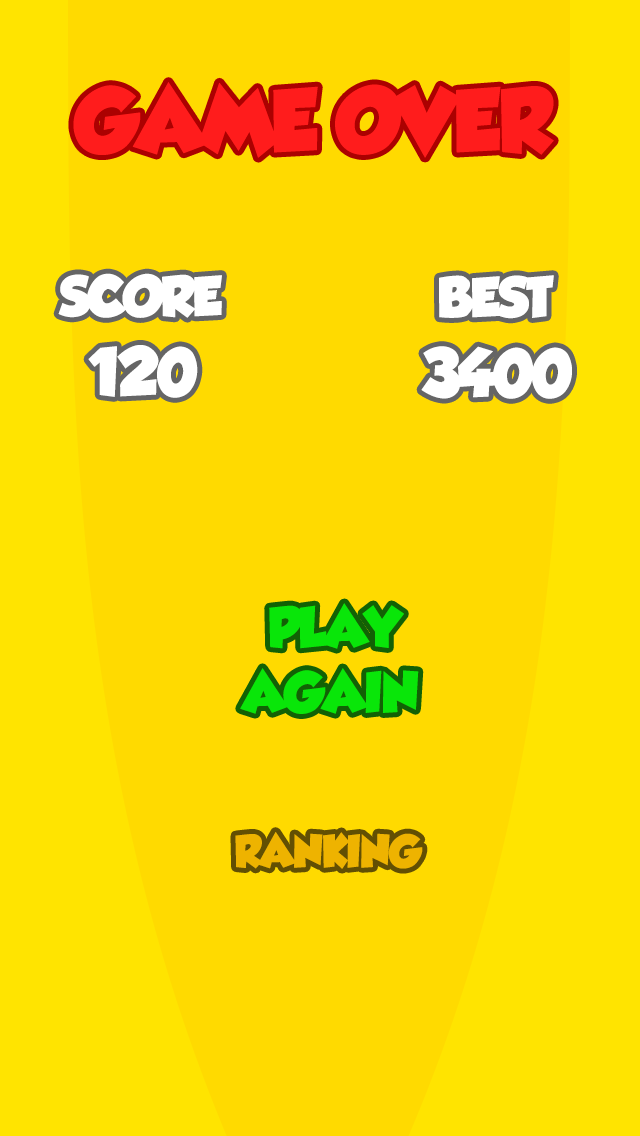
<style>
.page{position:relative;width:640px;height:1136px;background:#ffda00}
.page>*{position:absolute;margin:0}
.t1{font:80px "GROBOLD";letter-spacing:-0.03em;color:#ff1c1c}
.t2{font:50px "GROBOLD";letter-spacing:-0.03em;color:#ffffff}
.t3{font:60px "GROBOLD";letter-spacing:-0.03em;color:#ffffff}
.t4{font:50px "GROBOLD";letter-spacing:-0.03em;color:#09e609}
.t5{font:40px "GROBOLD";letter-spacing:-0.03em;color:#eeb300}
</style>
<div class="page">
<p class="t1" style="left:73px;top:82px;width:481px;height:76px">GAME OVER</p>
<p class="t2" style="left:58px;top:273px;width:164px;height:45px">SCORE</p>
<p class="t2" style="left:439px;top:275px;width:115px;height:44px">BEST</p>
<p class="t3" style="left:88px;top:345px;width:110px;height:53px">120</p>
<p class="t3" style="left:421px;top:346px;width:151px;height:53px">3400</p>
<p class="t4" style="left:269px;top:603px;width:135px;height:46px">PLAY</p>
<p class="t4" style="left:240px;top:668px;width:179px;height:46px">AGAIN</p>
<p class="t5" style="left:235px;top:832px;width:188px;height:37px">RANKING</p>
</div>
